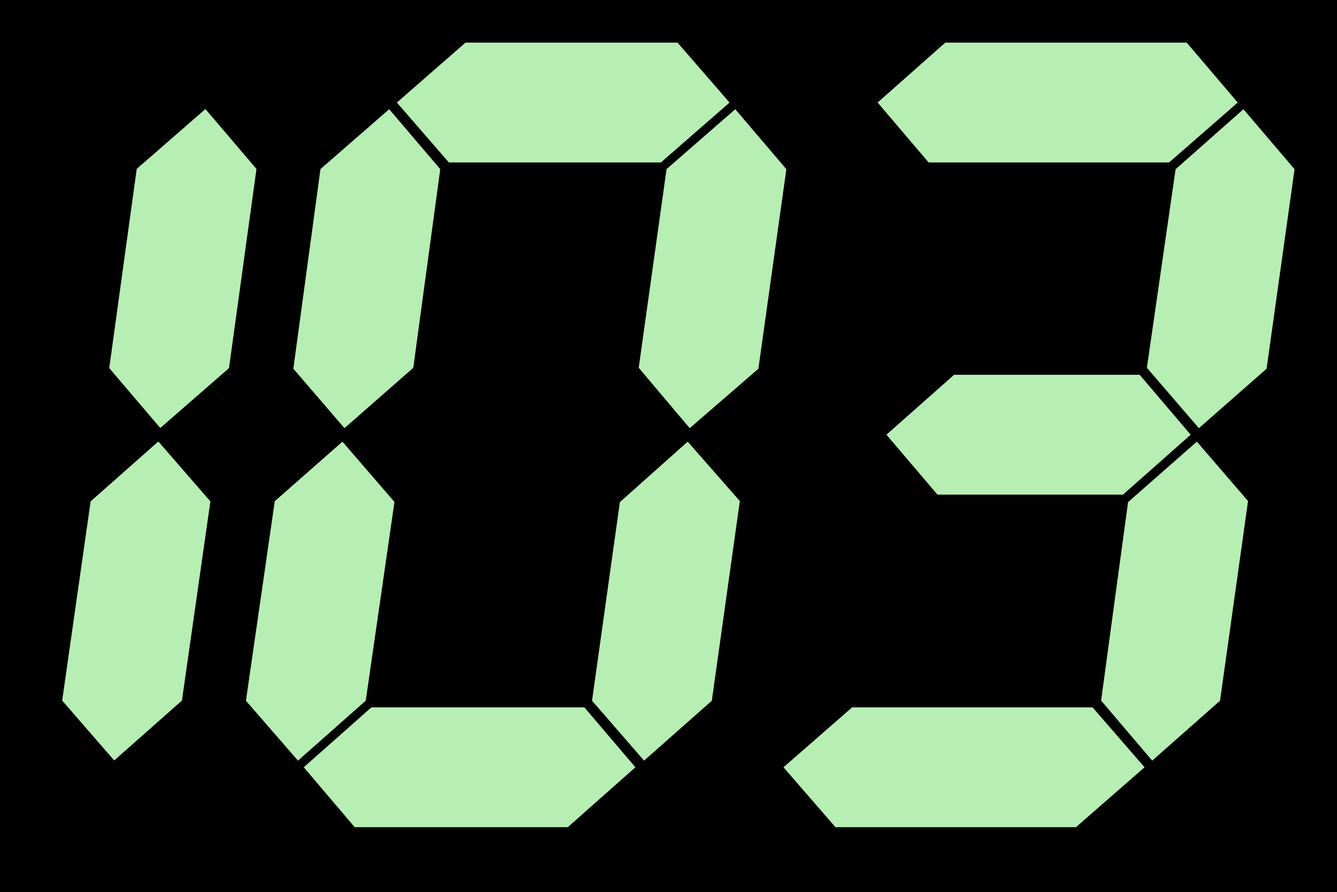
<style>
.page{position:relative;width:1337px;height:892px;background:#000000}
.page>*{position:absolute;margin:0}
.t1{font:980.6px "MouseLEDU";color:#b6eeb3}
</style>
<div class="page">
<p class="t1" style="left:62px;top:43px;width:1233px;height:784px">103</p>
</div>
